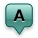
<style>
.page{position:relative;width:38px;height:38px;background:#ffffff}
.page>*{position:absolute;margin:0}
.t1{font:15.9px "HelveticaNeue-Bold";color:#000000}
</style>
<div class="page">
<p class="t1" style="left:13px;top:9px;width:12px;height:12px">A</p>
</div>
